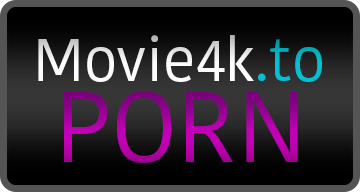
<style>
.page{position:relative;width:360px;height:192px}
.page>*{position:absolute;margin:0}
.t1{font:60px "KohinoorBangla-Regular";color:#fffefe}
.t2{font:60px "KohinoorBangla-Regular";color:#02c1d2}
.t3{font:100px "KohinoorBangla-Regular"}
</style>
<div class="page">
<p class="t1" style="left:38px;top:35px;width:284px;height:47px">Movie4k<span class="t2">.to</span></p>
<p class="t3" style="left:64px;top:91px;width:234px;height:72px">PORN</p>
</div>
